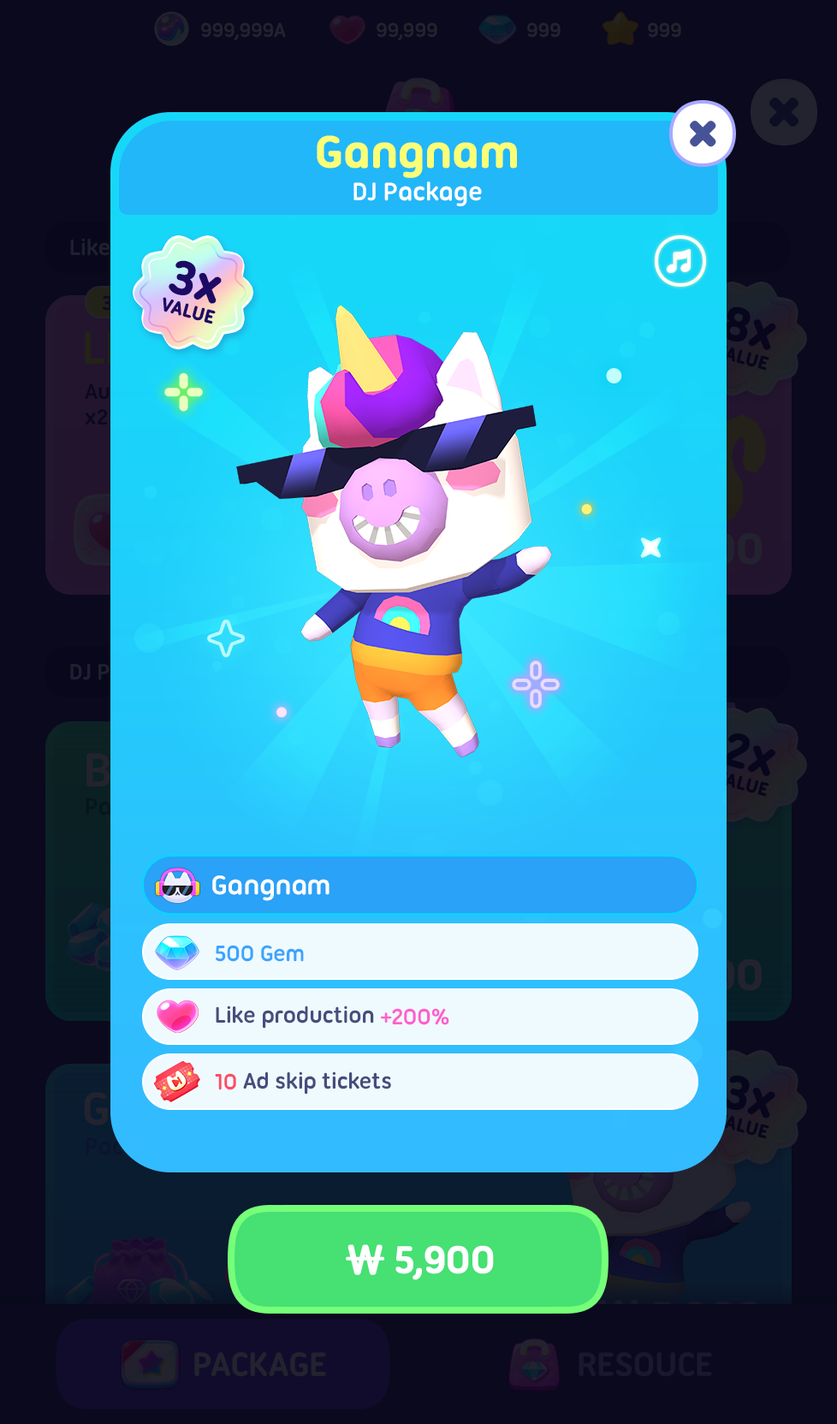
<style>
.page{position:relative;width:837px;height:1424px;background:#0a091e}
.page>*{position:absolute;margin:0}
.t1{font:47.9px "UbuntuTitling-Bold";letter-spacing:-0.025em;color:#fbff76;font-weight:bold}
.t2{font:27.4px "UbuntuTitling-Bold";letter-spacing:-0.025em;color:#ffffff}
.t3{font:49.9px "UbuntuTitling-Bold";letter-spacing:-0.025em;color:#1d0a64;font-weight:bold}
.t4{font:19.6px "UbuntuTitling-Bold";letter-spacing:-0.025em;color:#1d0a64;text-transform:uppercase;font-weight:bold}
.t5{font:29.1px "UbuntuTitling-Bold";letter-spacing:-0.025em;color:#ffffff}
.t6{font:24px "UbuntuTitling-Bold";letter-spacing:-0.025em;color:#3ba4ff}
.t7{font:24px "UbuntuTitling-Bold";letter-spacing:-0.025em;color:#454e7b}
.t8{font:24px "UbuntuTitling-Bold";letter-spacing:-0.025em;color:#ff60cc}
.t9{font:24px "UbuntuTitling-Bold";letter-spacing:-0.025em;color:#fe4c63}
.t10{font:41.1px "UbuntuTitling-Bold";letter-spacing:-0.04em;color:#ffffff;text-transform:uppercase;font-weight:bold}
.t11{font:41.1px "NanumSquareRoundOTFEB";letter-spacing:-0.04em;color:#ffffff;text-transform:uppercase;font-weight:bold}
</style>
<div class="page">
<p class="t1" style="left:317px;top:135px;width:200px;height:43px">Gangnam</p>
<p class="t2" style="left:354px;top:181px;width:128px;height:25px">DJ Package</p>
<p class="t3" style="left:169px;top:260px;width:53px;height:44px;rotate:15deg">3x</p>
<p class="t4" style="left:163px;top:297px;width:53px;height:27px;rotate:15deg">Value</p>
<p class="t5" style="left:212px;top:876px;width:118px;height:25px">Gangnam</p>
<p class="t6" style="left:216px;top:945px;width:88px;height:17px">500 Gem</p>
<p class="t7" style="left:216px;top:1006px;width:233px;height:23px">Like production <span class="t8">+200%</span></p>
<p class="t7" style="left:215px;top:1072px;width:176px;height:23px"><span class="t9">10 </span>Ad skip tickets</p>
<p class="t10" style="left:346px;top:1245px;width:148px;height:36px"><span class="t11">₩ </span>5,900</p>
</div>
